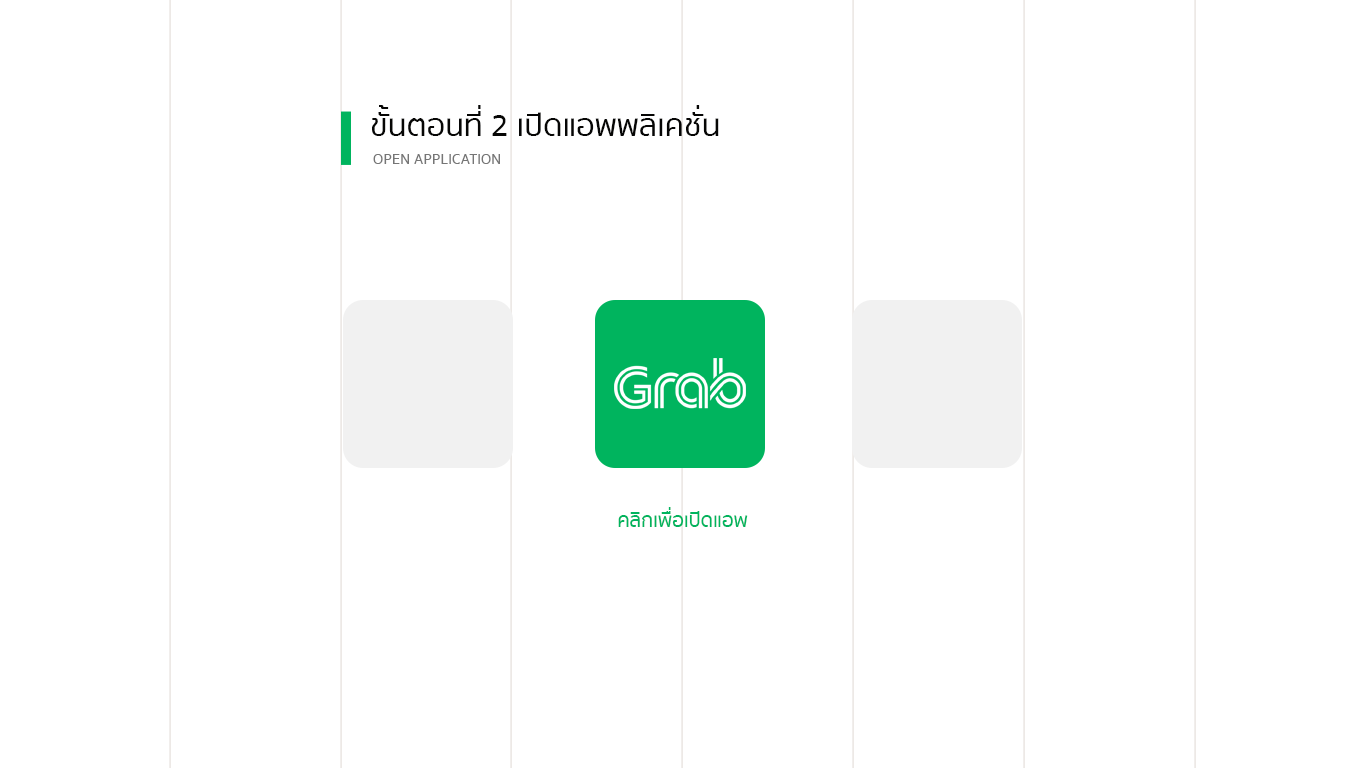
<style>
.page{position:relative;width:1366px;height:768px;background:#ffffff}
.page>*{position:absolute;margin:0}
.t1{font:27.9px "SukhumvitSet-Medium";color:#060605}
.t2{font:13.2px "SukhumvitSet-Medium";color:#767676}
.t3{font:17.6px "SukhumvitSet-Medium";color:#00b45e}
</style>
<div class="page">
<p class="t1" style="left:372px;top:105px;width:347px;height:31px">ขั้นตอนที่ 2 เปิดแอพพลิเคชั่น</p>
<p class="t2" style="left:373px;top:154px;width:127px;height:10px">OPEN APPLICATION</p>
<p class="t3" style="left:618px;top:507px;width:130px;height:20px">คลิกเพื่อเปิดแอพ</p>
</div>
